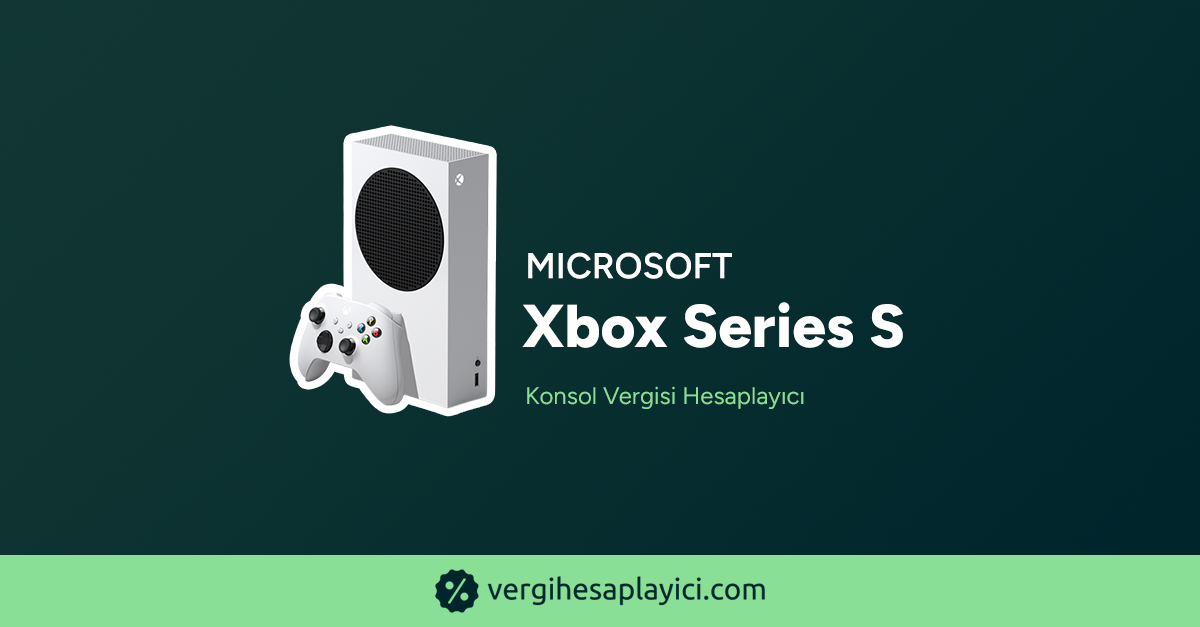
<style>
.page{position:relative;width:1200px;height:627px}
.page>*{position:absolute;margin:0}
.t1{font:36px "Figtree-SemiBold";color:#ffffff;text-transform:uppercase;font-weight:bold}
.t2{font:60.3px "Figtree-ExtraBold";color:#ffffff;font-weight:bold}
.t3{font:24px "Figtree-Regular";color:#88df95;font-weight:bold}
</style>
<div class="page">
<p class="t1" style="left:528px;top:252px;width:204px;height:27px">Microsoft</p>
<p class="t2" style="left:522px;top:302px;width:381px;height:46px">Xbox Series S</p>
<p class="t3" style="left:527px;top:386px;width:277px;height:23px">Konsol Vergisi Hesaplayıcı</p>
</div>
